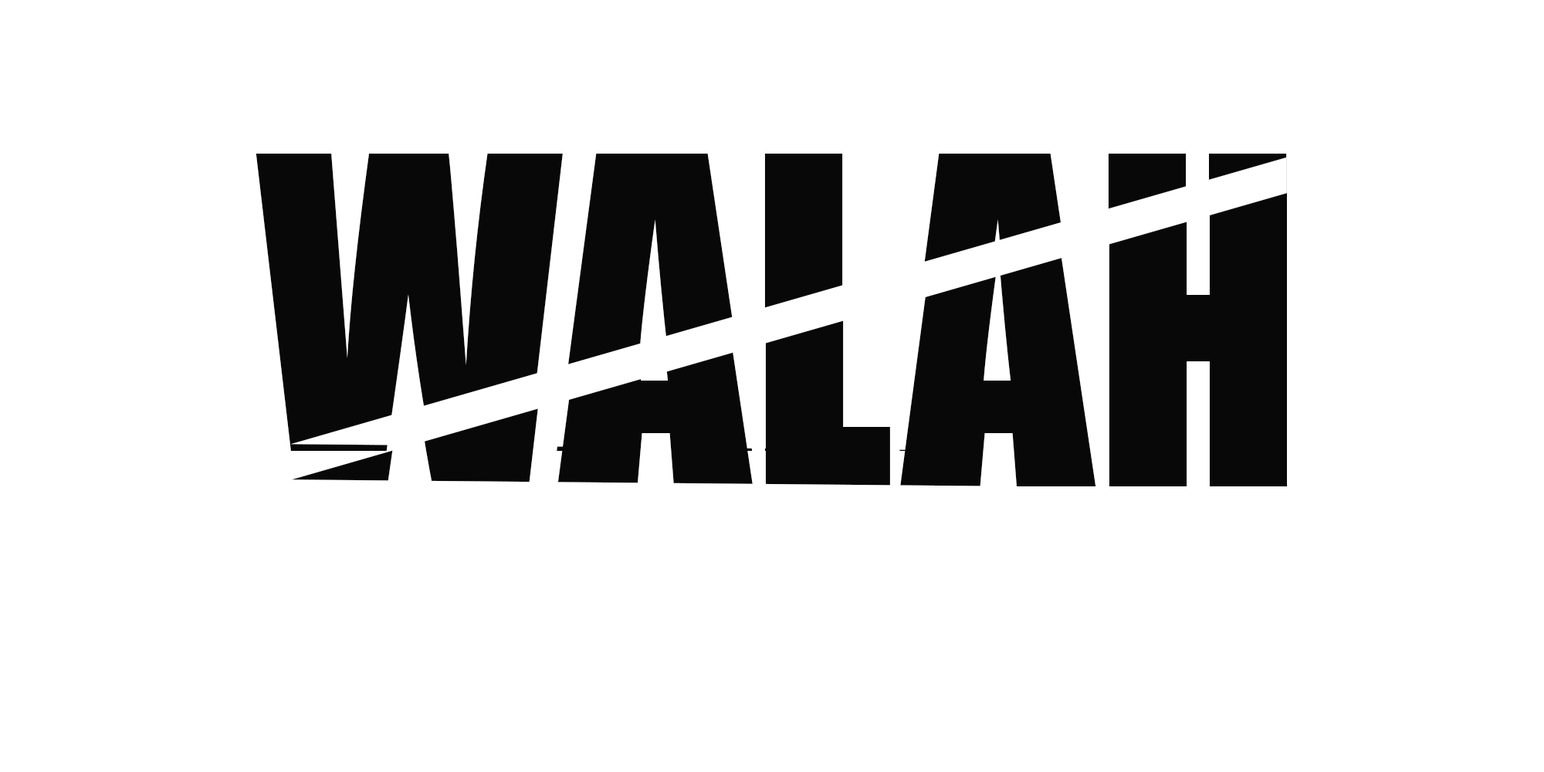
<style>
.page{position:relative;width:1544px;height:772px;background:#ffffff}
.page>*{position:absolute;margin:0}
.t1{font:376px "Impact";color:#080808}
</style>
<div class="page">
<p class="t1" style="left:256px;top:154px;width:1031px;height:297px">WALAH</p>
<p class="t1" style="left:256px;top:189px;width:1032px;height:297px">WALAH</p>
</div>
